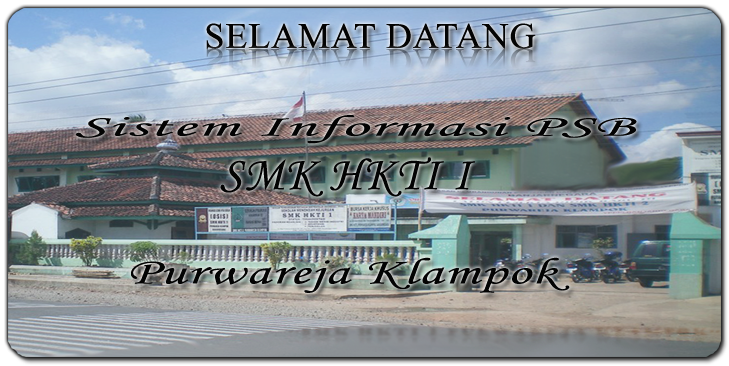
<style>
.page{position:relative;width:729px;height:366px}
.page>*{position:absolute;margin:0}
.t1{font:36px "TimesNewRomanPSMT";letter-spacing:0.025em;color:#030303}
.t2{font:36px "TimesNewRomanPSMT";letter-spacing:0.025em}
.t3{font:29.8px "MonotypeCorsiva";letter-spacing:0.025em;color:#030303;scale:2.27 1}
.t4{font:48px "MonotypeCorsiva";letter-spacing:0.025em;color:#030303}
.t5{font:37.1px "MonotypeCorsiva";letter-spacing:0.025em;color:#030303;scale:1.54 1}
</style>
<div class="page">
<p class="t1" style="left:206px;top:23px;width:330px;height:26px">SELAMAT DATANG</p>
<p class="t2" style="left:206px;top:48px;width:330px;height:26px">SELAMAT DATANG</p>
<p class="t3" style="left:75px;top:115px;width:562px;height:29px">Sistem Informasi PSB</p>
<p class="t4" style="left:220px;top:157px;width:256px;height:40px">SMK HKTI I</p>
<p class="t5" style="left:131px;top:257px;width:439px;height:36px">Purwareja Klampok</p>
</div>
